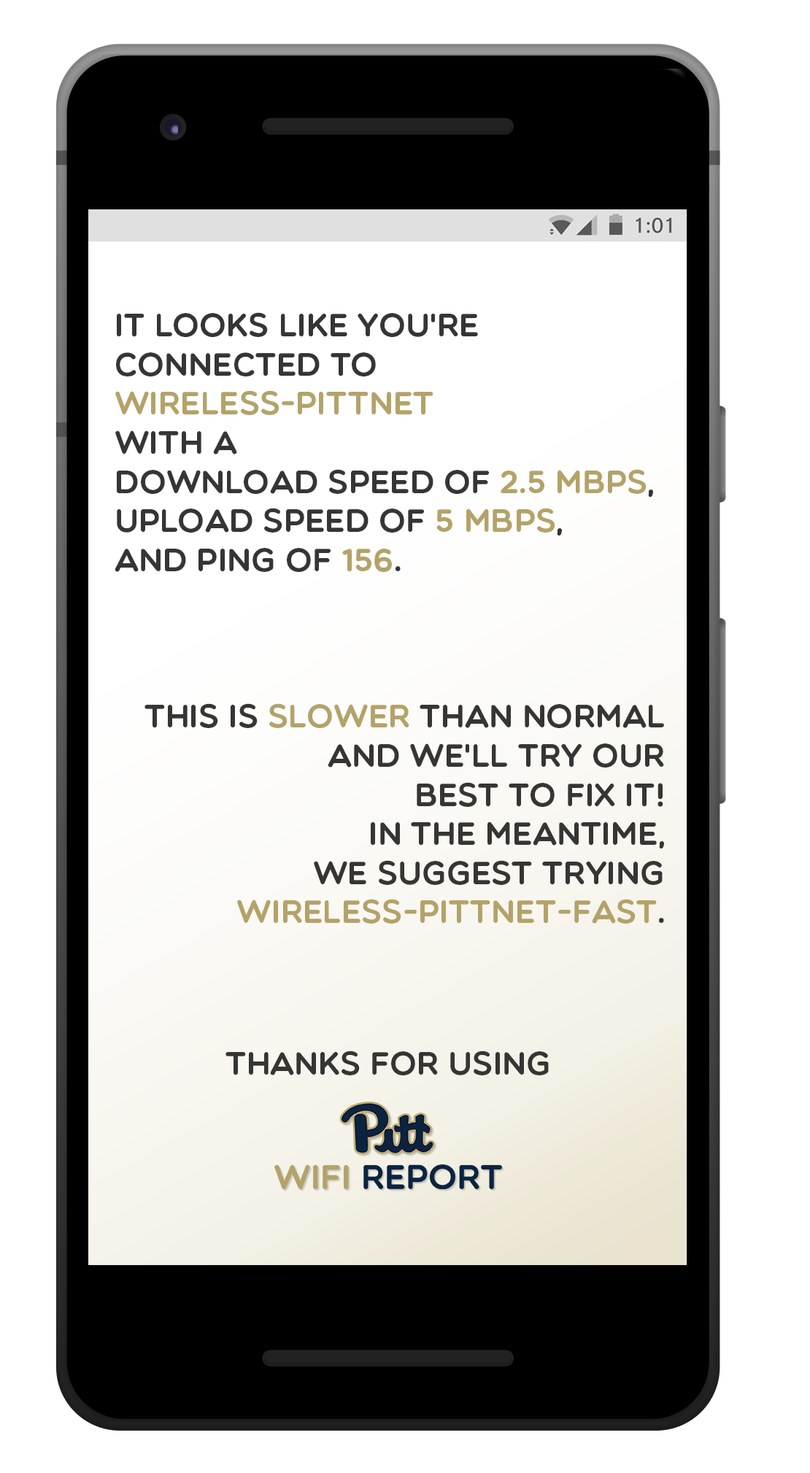
<style>
.page{position:relative;width:810px;height:1473px;background:#ffffff}
.page>*{position:absolute;margin:0}
.t1{font:32.6px "Multicolore";color:#353534}
.t2{font:32.6px "Multicolore";color:#b3a369}
</style>
<div class="page">
<p class="t1" style="left:115px;top:312px;width:538px;height:260px">It looks like you're<br>connected to<br><span class="t2">Wireless-Pittnet<br></span>With a <br>Download speed of <span class="t2">2.5 MBPS</span>, <br>Upload Speed of <span class="t2">5 MBPS</span>, <br>and Ping of <span class="t2">156</span>.</p>
<p class="t1" style="left:144px;top:703px;width:520px;height:220px;text-align:right">This is <span class="t2">slower</span> than normal<br>And we'll Try our<br>best to fix it!<br>In the meantime,<br>we suggest trying<br><span class="t2">Wireless-Pittnet-Fast</span>.</p>
<p class="t1" style="left:225px;top:1050px;width:324px;height:25px">Thanks for using</p>
</div>
